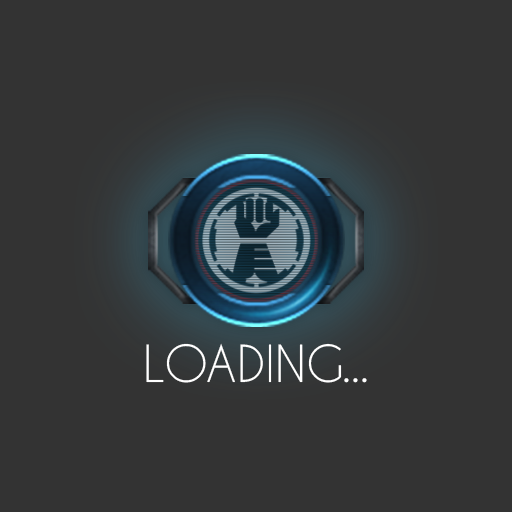
<style>
.page{position:relative;width:512px;height:512px;background:#333333}
.page>*{position:absolute;margin:0}
.t1{font:48px "CaviarDreams";color:#ffffff}
</style>
<div class="page">
<p class="t1" style="left:146px;top:343px;width:221px;height:40px">LOADING...</p>
</div>
